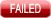
<style>
.page{position:relative;width:51px;height:18px}
.page>*{position:absolute;margin:0}
.t1{font:12.5px "ArialMT";color:#f9fefa;scale:0.71 1}
</style>
<div class="page">
<p class="t1" style="left:10px;top:3px;width:31px;height:10px">FAILED</p>
</div>
